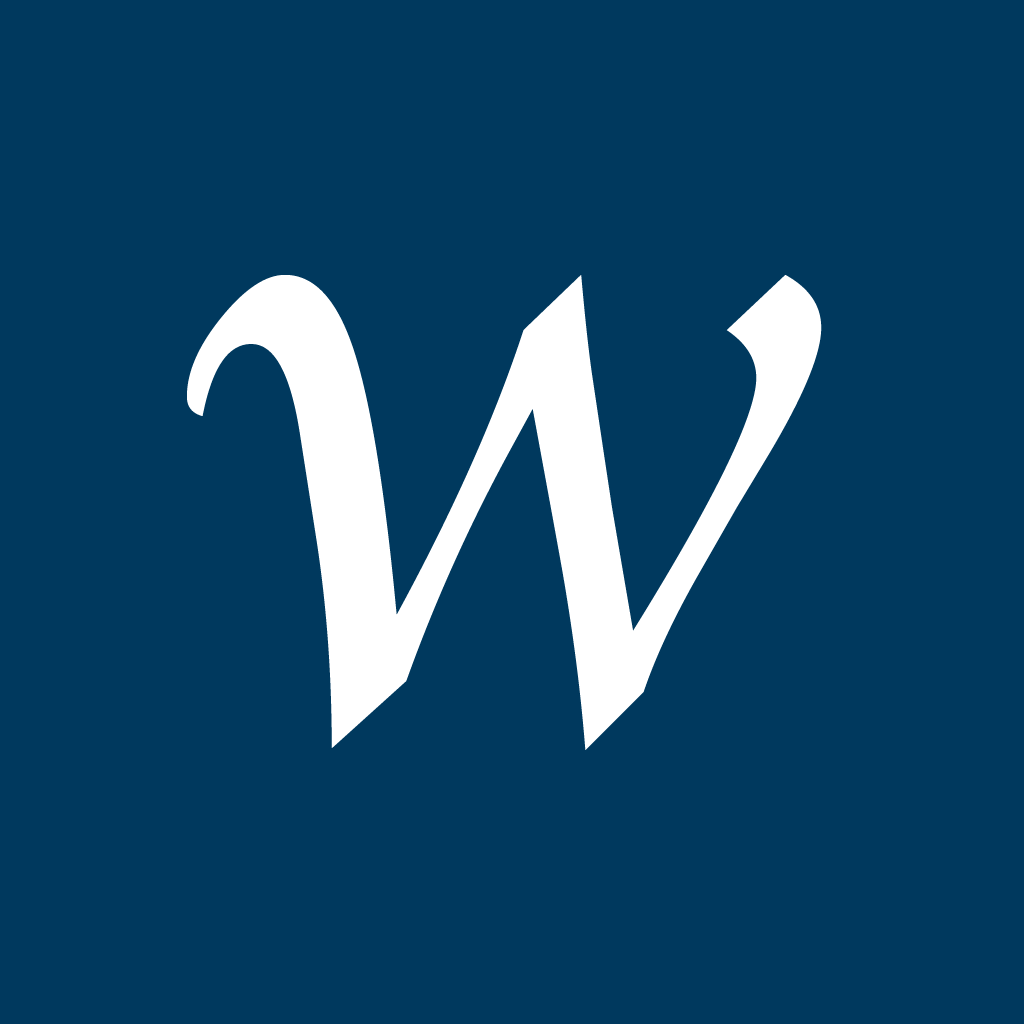
<style>
.page{position:relative;width:1024px;height:1024px;background:#00395e}
.page>*{position:absolute;margin:0}
.t1{font:988.6px "Apple-Chancery";color:#ffffff}
</style>
<div class="page">
<p class="t1" style="left:187px;top:275px;width:635px;height:475px">w</p>
</div>
